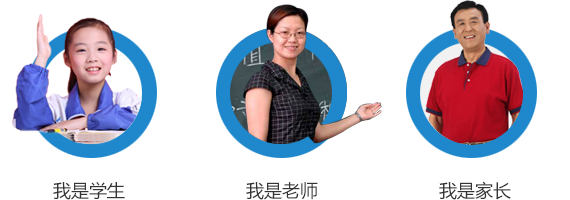
<style>
.page{position:relative;width:570px;height:200px;background:#ffffff}
.page>*{position:absolute;margin:0}
.t1{font:18px "MicrosoftYaHei";color:#353535}
</style>
<div class="page">
<p class="t1" style="left:53px;top:182px;width:72px;height:18px">我是学生</p>
<p class="t1" style="left:246px;top:182px;width:72px;height:18px">我是老师</p>
<p class="t1" style="left:439px;top:181px;width:72px;height:19px">我是家长</p>
</div>
